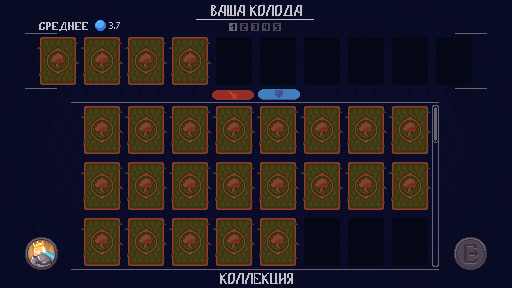
<style>
.page{position:relative;width:512px;height:288px}
.page>*{position:absolute;margin:0}
.t1{font:12px "Artika_font-Regular";color:#c5c1cb}
</style>
<div class="page">
<p class="t1" style="left:211px;top:5px;width:91px;height:11px">Ваша колода</p>
<p class="t1" style="left:220px;top:273px;width:73px;height:11px">Коллекция</p>
</div>
